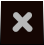
<style>
.page{position:relative;width:44px;height:45px;background:#150603}
.page>*{position:absolute;margin:0}
.t1{font:38.5px "Nunito-Black";color:#b7b7b7}
</style>
<div class="page">
<p class="t1" style="left:12px;top:12px;width:21px;height:20px">x</p>
</div>
